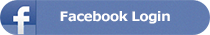
<style>
.page{position:relative;width:210px;height:35px}
.page>*{position:absolute;margin:0}
.t1{font:13.1px "Verdana-Bold";letter-spacing:-0.025em;color:#ffffff}
</style>
<div class="page">
<p class="t1" style="left:60px;top:11px;width:110px;height:13px">Facebook Login</p>
</div>
